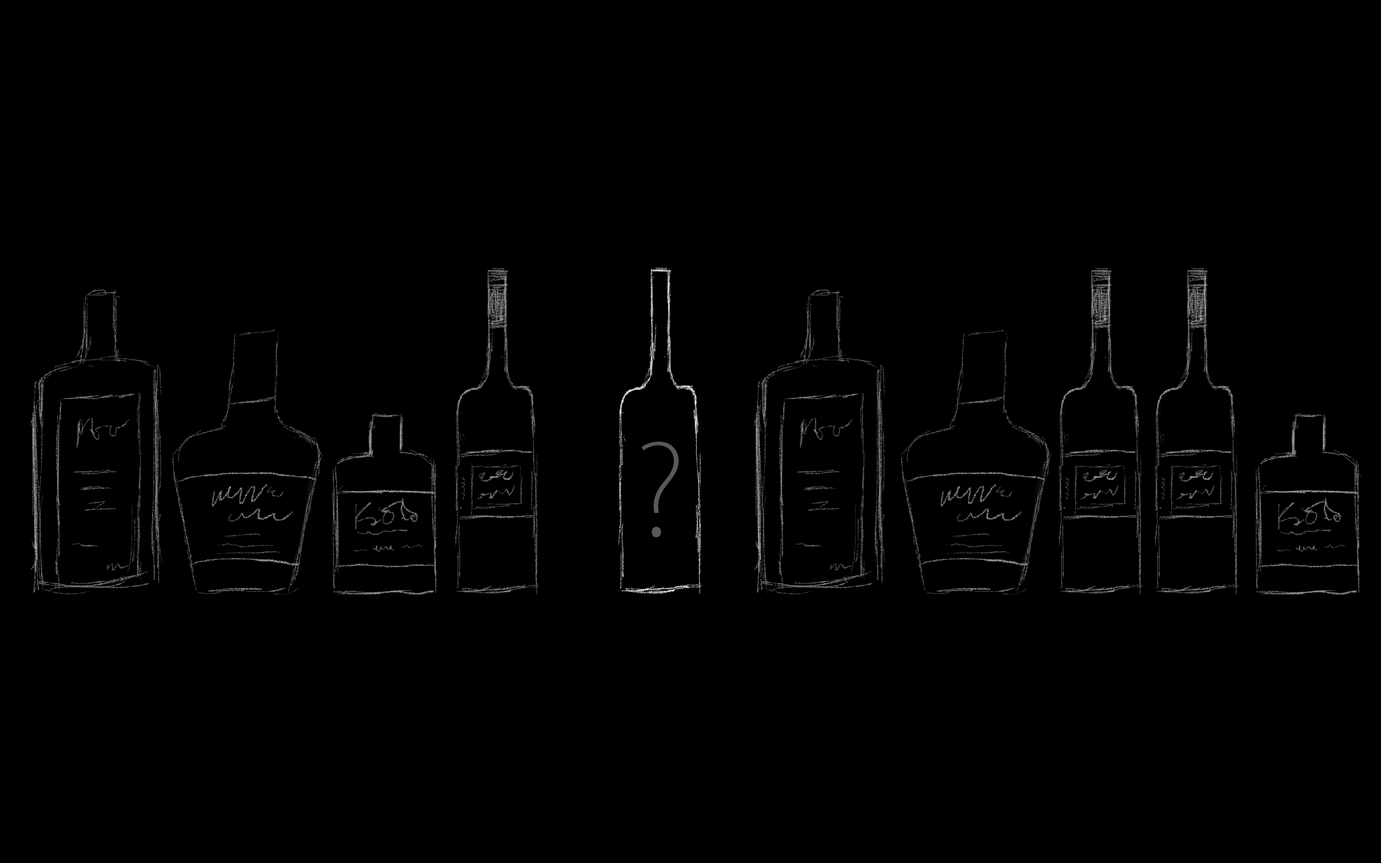
<style>
.page{position:relative;width:1381px;height:863px;background:#000000}
.page>*{position:absolute;margin:0}
.t1{font:122.5px "KozGoPr6N-ExtraLight";letter-spacing:0.04em;color:#595959}
</style>
<div class="page">
<p class="t1" style="left:642px;top:441px;width:37px;height:96px">?</p>
</div>
